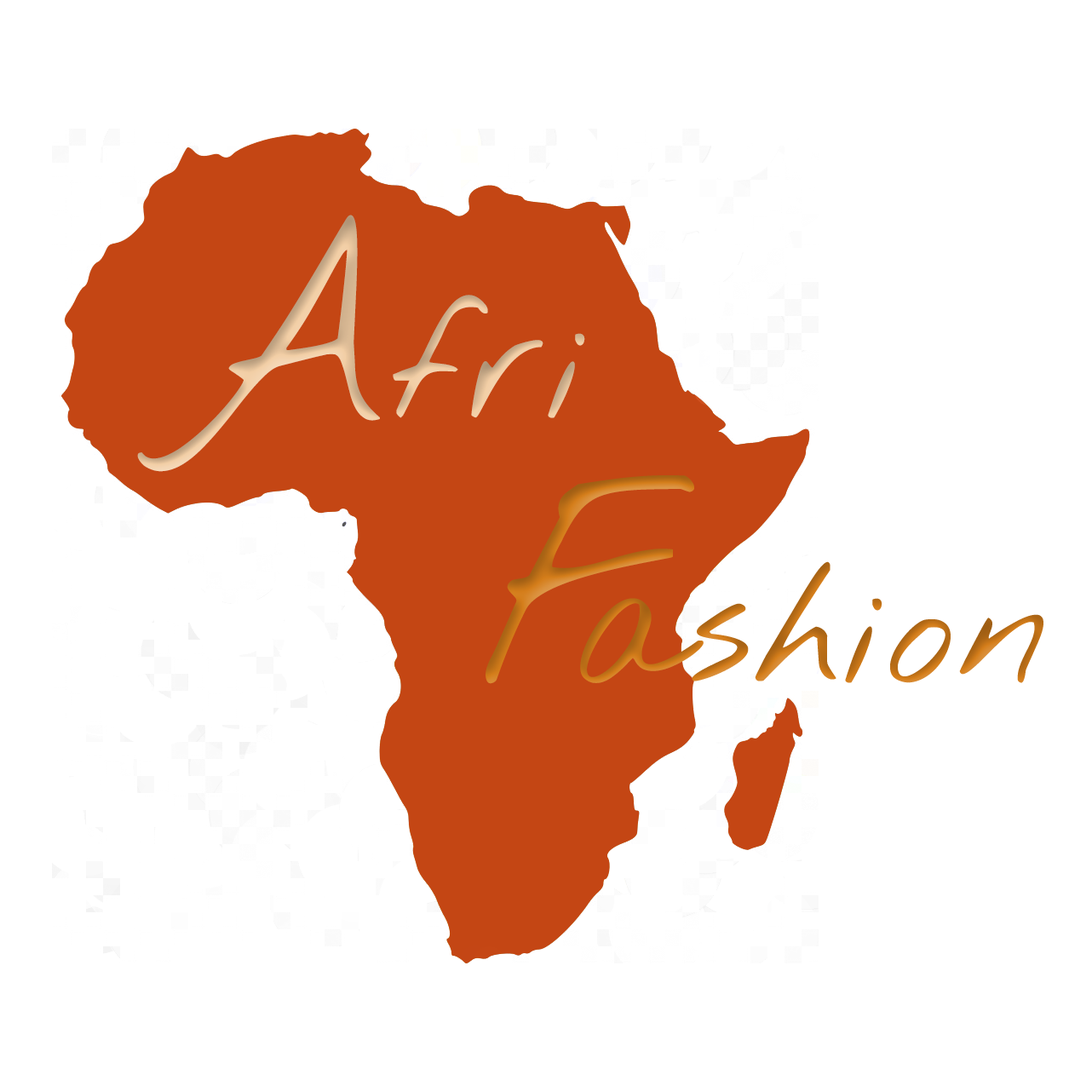
<style>
.page{position:relative;width:1092px;height:1092px;background:#ffffff}
.page>*{position:absolute;margin:0}
.t1{font:127.8px "NothingYouCouldDo";font-weight:bold}
.t2{font:212.9px "NothingYouCouldDo";font-weight:bold}
.t3{font:127.8px "NothingYouCouldDo";color:#c07118;font-weight:bold}
</style>
<div class="page">
<p class="t1" style="left:137px;top:215px;width:448px;height:257px"><span class="t2">A</span>fri</p>
<p class="t2" style="left:486px;top:475px;width:208px;height:209px">F</p>
<p class="t3" style="left:580px;top:561px;width:463px;height:122px">ashion</p>
</div>
